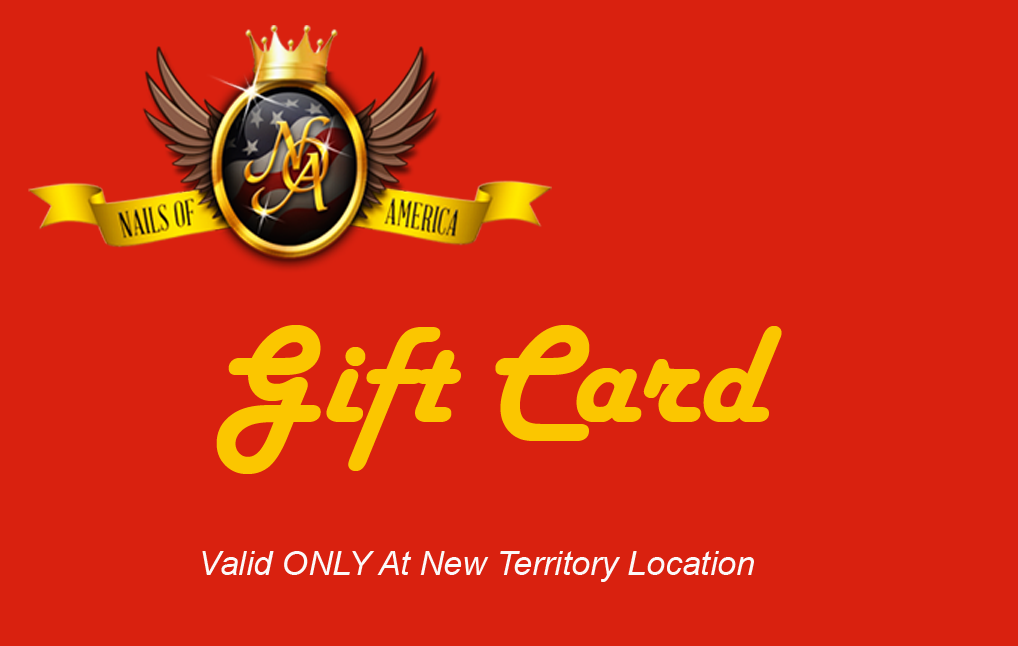
<style>
.page{position:relative;width:1018px;height:646px;background:#d9210f}
.page>*{position:absolute;margin:0}
.t1{font:142.5px "HarlowSolid";color:#fbc600}
.t2{font:33.2px "Arial-ItalicMT";color:#fbf9f9}
</style>
<div class="page">
<p class="t1" style="left:216px;top:325px;width:566px;height:149px">Gift Card</p>
<p class="t2" style="left:202px;top:551px;width:552px;height:31px">Valid ONLY At New Territory Location</p>
</div>
